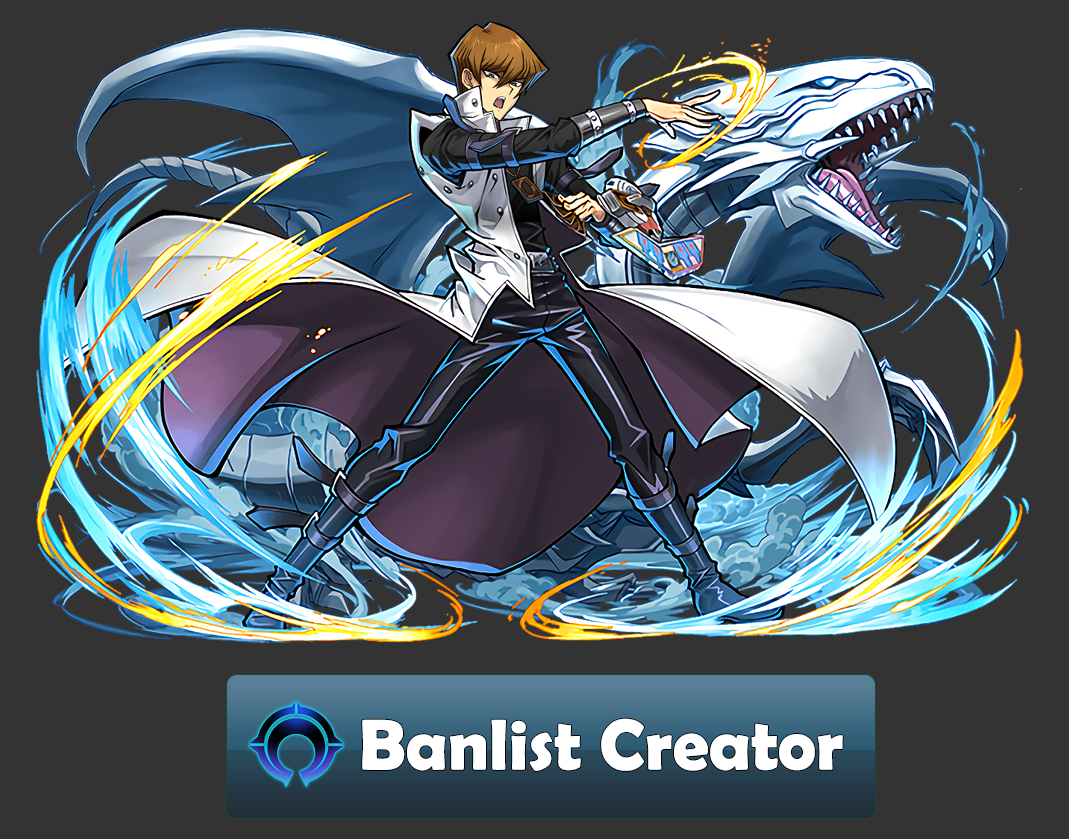
<style>
.page{position:relative;width:1069px;height:839px;background:#333333}
.page>*{position:absolute;margin:0}
.t1{font:72.2px "BerlinSansFBDemi-Bold";color:#ffffff}
</style>
<div class="page">
<p class="t1" style="left:362px;top:718px;width:481px;height:53px">Banlist Creator</p>
</div>
